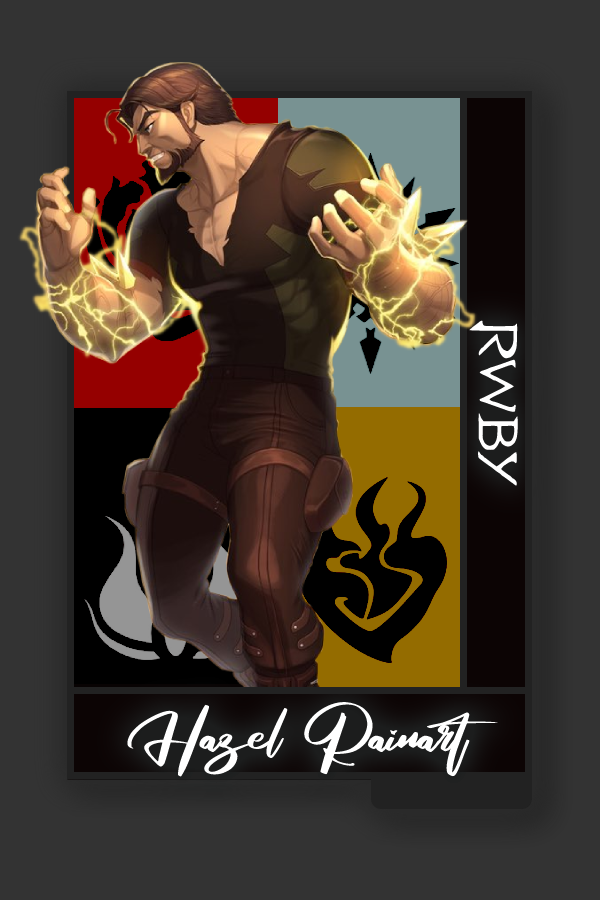
<style>
.page{position:relative;width:600px;height:900px;background:#333333}
.page>*{position:absolute;margin:0}
.t1{font:61.3px "RWBY_Style";color:#ffffff;scale:1.25 1}
.t2{font:75px "RosegaFREE";color:#ffffff}
</style>
<div class="page">
<p class="t1" style="left:469px;top:320px;width:49px;height:166px;rotate:90deg">RWBY</p>
<p class="t2" style="left:126px;top:701px;width:373px;height:77px">Hazel Rainart</p>
</div>
